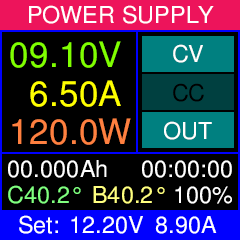
<style>
.page{position:relative;width:240px;height:240px;background:#000000}
.page>*{position:absolute;margin:0}
.t1{font:23.3px "FreeSans";letter-spacing:0.01em;color:#ffffff}
.t2{font:35px "FreeSans";letter-spacing:0.01em;color:#80ff00}
.t3{font:23.3px "FreeSans";letter-spacing:0.01em;color:#fffffe}
.t4{font:35px "FreeSans";letter-spacing:0.01em;color:#ffff00}
.t5{font:23.3px "FreeSans";letter-spacing:0.01em;color:#000000}
.t6{font:35px "FreeSans";letter-spacing:0.01em;color:#ff8040}
.t7{font:23.3px "FreeSans";letter-spacing:0.01em;color:#80ff80}
.t8{font:23.3px "FreeSans";letter-spacing:0.01em;color:#ffff80}
</style>
<div class="page">
<p class="t1" style="left:29px;top:5px;width:185px;height:19px">POWER SUPPLY</p>
<p class="t2" style="left:10px;top:41px;width:111px;height:27px">09.10V</p>
<p class="t3" style="left:173px;top:44px;width:30px;height:19px">CV</p>
<p class="t4" style="left:30px;top:80px;width:91px;height:27px">6.50A</p>
<p class="t5" style="left:173px;top:83px;width:31px;height:19px">CC</p>
<p class="t6" style="left:12px;top:118px;width:119px;height:27px">120.0W</p>
<p class="t3" style="left:164px;top:121px;width:48px;height:19px">OUT</p>
<p class="t1" style="left:8px;top:160px;width:99px;height:18px">00.000Ah</p>
<p class="t1" style="left:142px;top:160px;width:90px;height:18px">00:00:00</p>
<p class="t7" style="left:8px;top:185px;width:73px;height:19px">C40.2°</p>
<p class="t8" style="left:93px;top:186px;width:72px;height:18px">B40.2°</p>
<p class="t1" style="left:175px;top:186px;width:57px;height:18px">100%</p>
<p class="t1" style="left:19px;top:215px;width:39px;height:19px">Set:</p>
<p class="t1" style="left:71px;top:216px;width:72px;height:18px">12.20V</p>
<p class="t1" style="left:155px;top:216px;width:62px;height:18px">8.90A</p>
</div>
